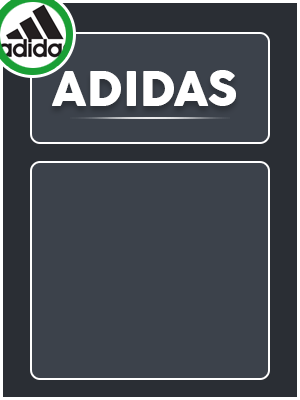
<style>
.page{position:relative;width:300px;height:400px;background:#3c424b}
.page>*{position:absolute;margin:0}
.t1{font:46.7px "Cocogoose";color:#ffffff}
</style>
<div class="page">
<p class="t1" style="left:52px;top:70px;width:184px;height:36px">ADIDAS</p>
</div>
